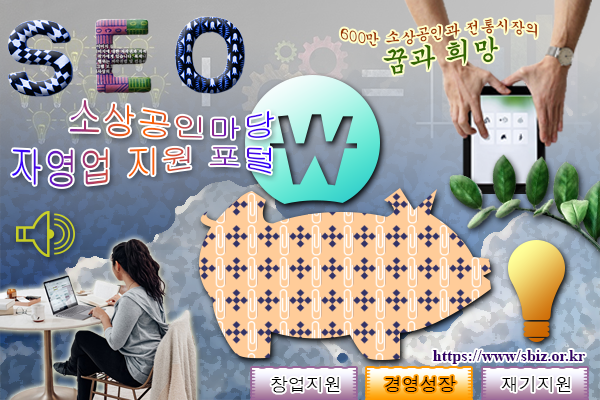
<style>
.page{position:relative;width:600px;height:400px}
.page>*{position:absolute;margin:0}
.t1{font:15px/28px "Gungsuh";color:#993300}
.t2{font:27px/28px "Gungsuh";color:#336600}
.t3{font:35px/40px "Gulim"}
.t4{font:16px "TimesNewRomanPS-BoldMT";color:#330066}
.t5{font:18px "Dotum";color:#000000}
</style>
<div class="page">
<p class="t1" style="left:340px;top:18px;width:197px;height:57px;text-align:center">600만 소상공인과 전통시장의<br><span class="t2">꿈과 희망</span></p>
<p class="t3" style="left:12px;top:100px;width:262px;height:87px;text-align:right">소상공인마당<br>자영업 지원 포털</p>
<p class="t4" style="left:433px;top:350px;width:152px;height:14px">https://www/sbiz.or.kr</p>
<p class="t5" style="left:271px;top:376px;width:69px;height:17px">창업지원</p>
<p class="t5" style="left:385px;top:376px;width:71px;height:16px">경영성장</p>
<p class="t5" style="left:501px;top:376px;width:70px;height:16px">재기지원</p>
</div>
